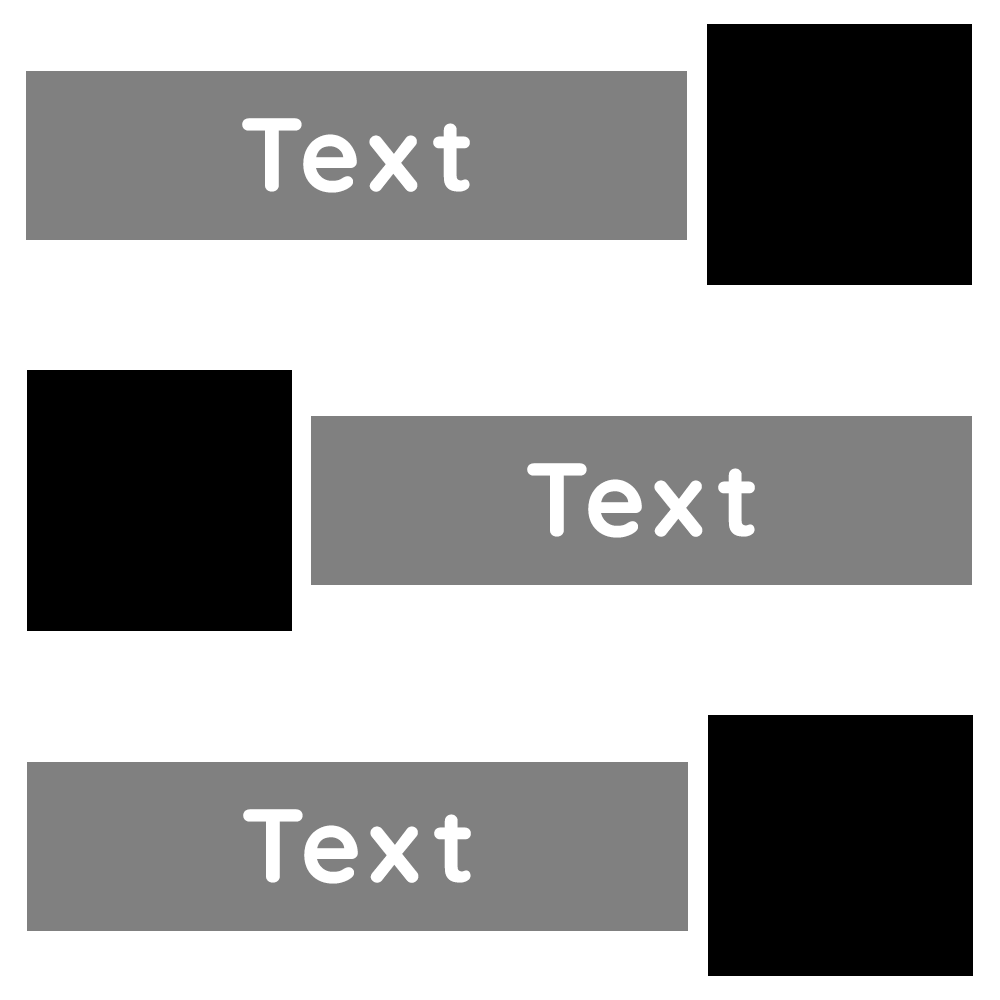
<style>
.page{position:relative;width:1000px;height:1000px;background:#ffffff}
.page>*{position:absolute;margin:0}
.t1{font:104.2px "Quicksand-Bold";letter-spacing:0.075em;color:#ffffff}
</style>
<div class="page">
<p class="t1" style="left:242px;top:118px;width:228px;height:75px">Text</p>
<p class="t1" style="left:527px;top:463px;width:228px;height:75px">Text</p>
<p class="t1" style="left:243px;top:809px;width:228px;height:75px">Text</p>
</div>
